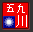
<style>
.page{position:relative;width:33px;height:32px;background:#f20000}
.page>*{position:absolute;margin:0}
.t1{font:10.4px "SimSun";color:#ffffff}
.t2{font:11.7px "SimSun";color:#ffffff}
</style>
<div class="page">
<p class="t1" style="left:7px;top:4px;width:18px;height:9px">五九</p>
<p class="t2" style="left:16px;top:15px;width:11px;height:12px">川</p>
</div>
